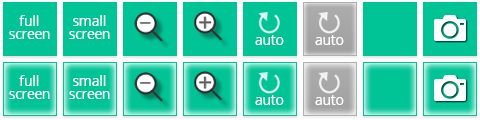
<style>
.page{position:relative;width:480px;height:120px;background:#00c496}
.page>*{position:absolute;margin:0}
.t1{font:14px/13.1px "OpenSans";letter-spacing:-0.01em;color:#ffffff}
.t2{font:14px "OpenSans";color:#ffffff}
</style>
<div class="page">
<p class="t1" style="left:9px;top:15px;width:41px;height:24px;text-align:center">full<br>screen</p>
<p class="t1" style="left:69px;top:15px;width:41px;height:24px;text-align:center">small<br>screen</p>
<p class="t2" style="left:255px;top:35px;width:29px;height:10px">auto</p>
<p class="t2" style="left:315px;top:35px;width:29px;height:10px">auto</p>
<p class="t1" style="left:9px;top:75px;width:41px;height:24px;text-align:center">full<br>screen</p>
<p class="t1" style="left:69px;top:75px;width:41px;height:24px;text-align:center">small<br>screen</p>
<p class="t2" style="left:255px;top:95px;width:29px;height:10px">auto</p>
<p class="t2" style="left:315px;top:95px;width:29px;height:10px">auto</p>
</div>
